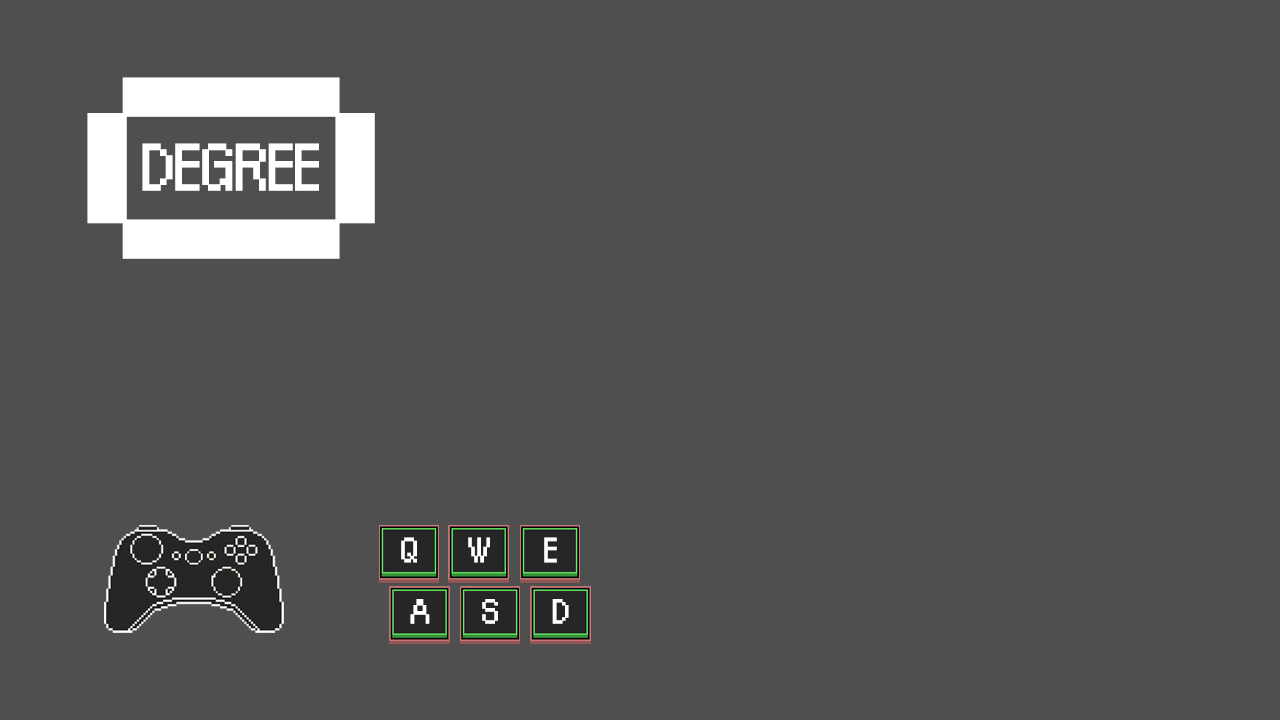
<style>
.page{position:relative;width:1280px;height:720px;background:#4f4f4f}
.page>*{position:absolute;margin:0}
.t1{font:443.2px "OrangeKid";letter-spacing:-0.01em;color:#ffffff}
.t2{font:72.6px "OrangeKid";letter-spacing:-0.01em;color:#ffffff}
.t3{font:37.9px "OrangeKid";letter-spacing:-0.01em;color:#ffffff}
</style>
<div class="page">
<p class="t1" style="left:87px;top:77px;width:288px;height:182px;rotate:90deg">O</p>
<p class="t2" style="left:142px;top:143px;width:177px;height:48px">DEGREE</p>
<p class="t3" style="left:401px;top:537px;width:16px;height:26px">Q</p>
<p class="t3" style="left:468px;top:537px;width:22px;height:26px">W</p>
<p class="t3" style="left:544px;top:537px;width:13px;height:26px">E</p>
<p class="t3" style="left:410px;top:599px;width:20px;height:25px">A</p>
<p class="t3" style="left:482px;top:599px;width:16px;height:25px">S</p>
<p class="t3" style="left:552px;top:599px;width:17px;height:25px">D</p>
</div>
